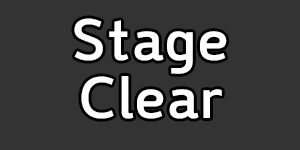
<style>
.page{position:relative;width:300px;height:150px;background:#333333}
.page>*{position:absolute;margin:0}
.t1{font:58.3px/58.3px "GyeonggiTitleMOTF";color:#ffffff}
</style>
<div class="page">
<p class="t1" style="left:74px;top:18px;width:153px;height:101px;text-align:center">Stage<br>Clear</p>
</div>
